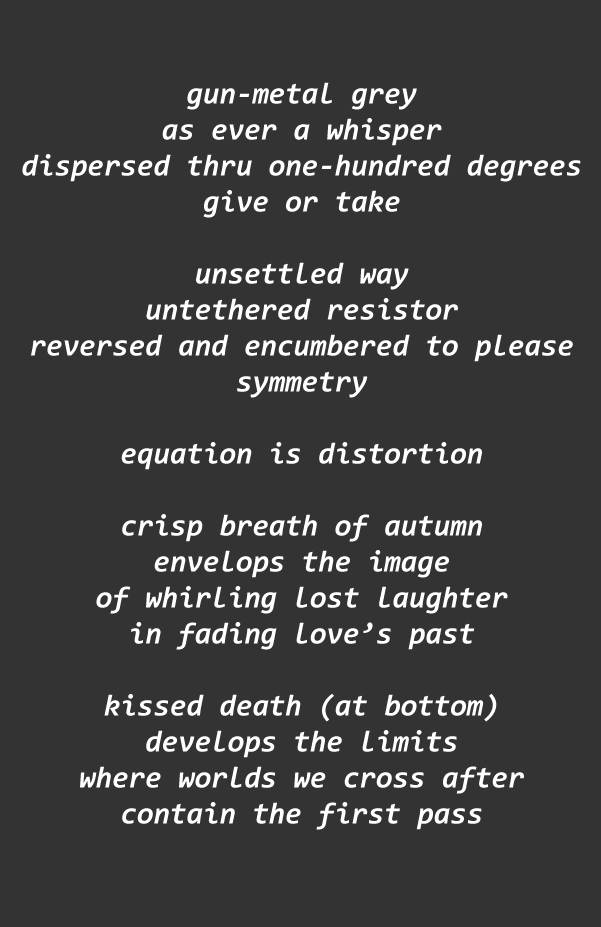
<style>
.page{position:relative;width:601px;height:927px;background:#333333}
.page>*{position:absolute;margin:0}
.t1{font:30px "Consolas-BoldItalic";color:#ffffff}
</style>
<div class="page">
<p class="t1" style="left:22px;top:82px;width:559px;height:748px;text-align:center">gun-metal grey<br>as ever a whisper<br>dispersed thru one-hundred degrees<br>give or take<br><br>unsettled way<br>untethered resistor<br>reversed and encumbered to please<br>symmetry<br><br>equation is distortion<br><br>crisp breath of autumn<br>envelops the image<br>of whirling lost laughter<br>in fading love’s past<br><br>kissed death (at bottom)<br>develops the limits<br>where worlds we cross after<br>contain the first pass</p>
</div>
